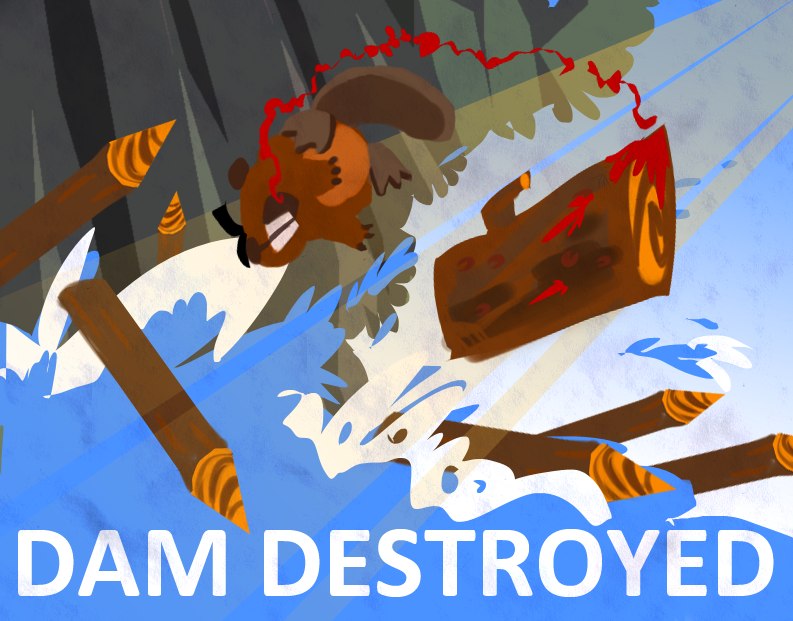
<style>
.page{position:relative;width:793px;height:621px}
.page>*{position:absolute;margin:0}
.t1{font:105px "Calibri-Bold";color:#ffffff}
</style>
<div class="page">
<p class="t1" style="left:18px;top:529px;width:756px;height:68px">DAM DESTROYED</p>
</div>
